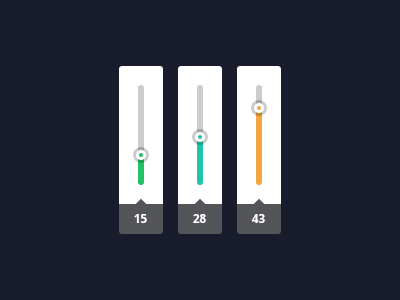
<style>
.page{position:relative;width:400px;height:300px;background:#181c2c}
.page>*{position:absolute;margin:0}
.t1{font:12px "DroidSans-Bold";color:#ffffff}
</style>
<div class="page">
<p class="t1" style="left:134px;top:214px;width:13px;height:9px">15</p>
<p class="t1" style="left:193px;top:214px;width:13px;height:9px">28</p>
<p class="t1" style="left:251px;top:214px;width:14px;height:9px">43</p>
</div>
